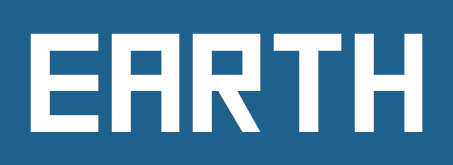
<style>
.page{position:relative;width:453px;height:165px;background:#1e618d}
.page>*{position:absolute;margin:0}
.t1{font:140px "SquareFont";color:#ffffff}
</style>
<div class="page">
<p class="t1" style="left:30px;top:33px;width:393px;height:99px">earth</p>
</div>
